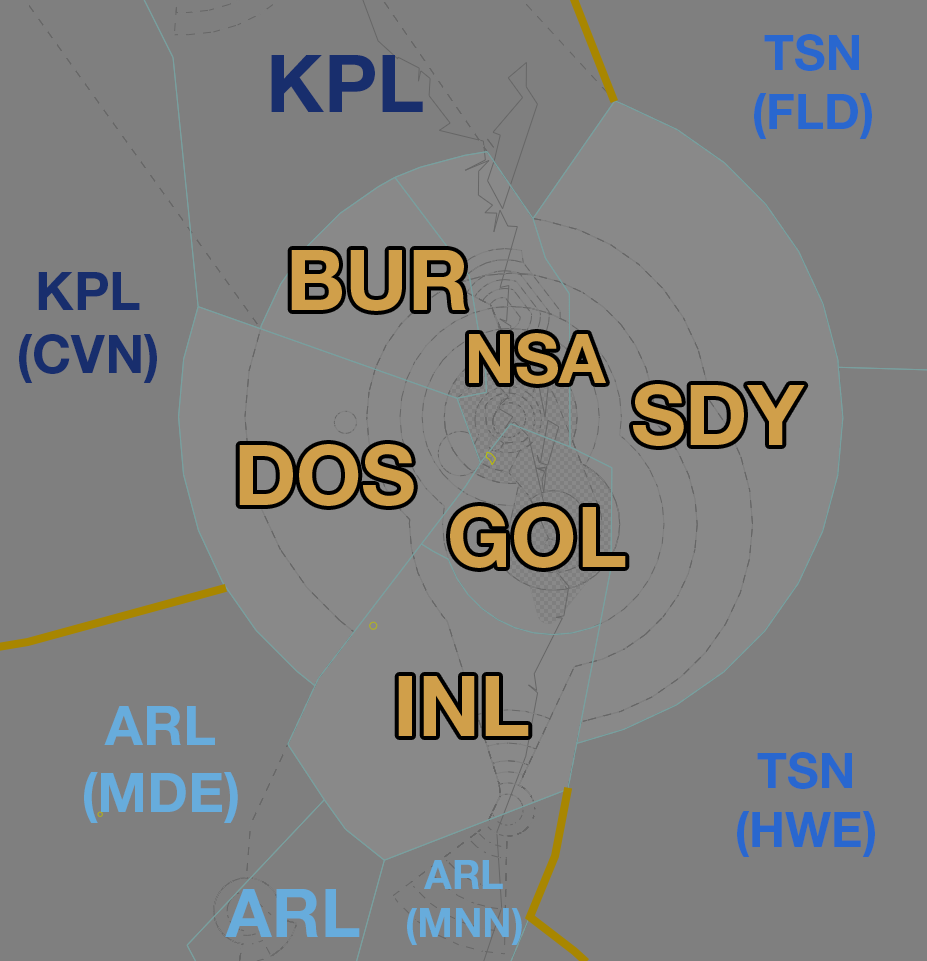
<style>
.page{position:relative;width:927px;height:961px;background:#7f7f7f}
.page>*{position:absolute;margin:0}
.t1{font:48.8px "HelveticaNeueLTStd-Bd";color:#2967cf}
.t2{font:79.2px "HelveticaNeueLTStd-Bd";color:#182e6d}
.t3{font:84.1px "HelveticaNeueLTStd-Bd";color:#d09f4a}
.t4{font:52.9px "HelveticaNeueLTStd-Bd";color:#182e6d}
.t5{font:68.5px "HelveticaNeueLTStd-Bd";color:#d09f4a}
.t6{font:55.1px "HelveticaNeueLTStd-Bd";color:#67acdc}
.t7{font:39.9px "HelveticaNeueLTStd-Bd";color:#67acdc}
.t8{font:67px "HelveticaNeueLTStd-Bd";color:#67acdc}
</style>
<div class="page">
<p class="t1" style="left:754px;top:34px;width:118px;height:105px;text-align:center">TSN<br>(FLD)</p>
<p class="t2" style="left:271px;top:55px;width:152px;height:57px">KPL</p>
<p class="t3" style="left:291px;top:250px;width:175px;height:61px">BUR</p>
<p class="t4" style="left:19px;top:272px;width:138px;height:111px;text-align:center">KPL<br>(CVN)</p>
<p class="t5" style="left:469px;top:333px;width:137px;height:51px">NSA</p>
<p class="t3" style="left:633px;top:384px;width:172px;height:62px">SDY</p>
<p class="t3" style="left:239px;top:444px;width:175px;height:62px">DOS</p>
<p class="t3" style="left:450px;top:506px;width:176px;height:62px">GOL</p>
<p class="t3" style="left:398px;top:676px;width:131px;height:60px">INL</p>
<p class="t6" style="left:84px;top:706px;width:154px;height:117px;text-align:center">ARL<br>(MDE)</p>
<p class="t1" style="left:737px;top:752px;width:138px;height:105px;text-align:center">TSN<br>(HWE)</p>
<p class="t7" style="left:407px;top:860px;width:115px;height:85px;text-align:center">ARL<br>(MNN)</p>
<p class="t8" style="left:225px;top:889px;width:135px;height:48px">ARL</p>
</div>
